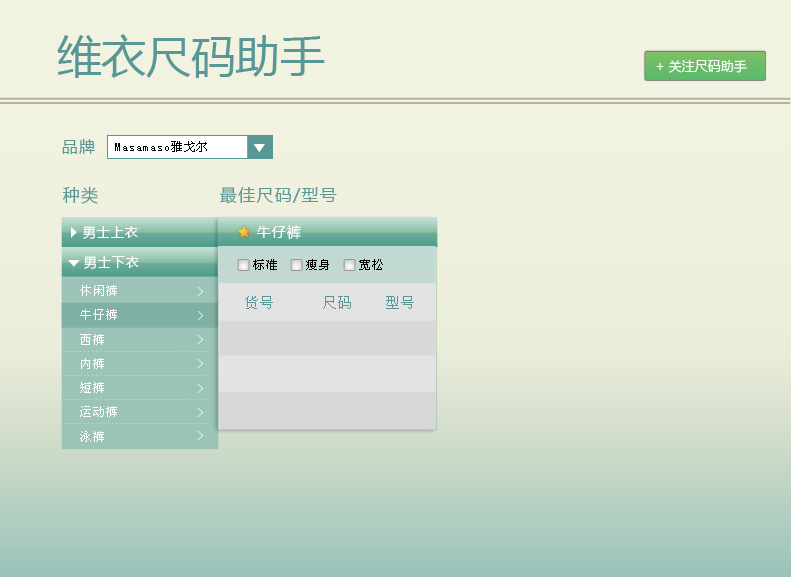
<style>
.page{position:relative;width:791px;height:577px;background:#f2f2e0}
.page>*{position:absolute;margin:0}
.t1{font:44.7px "MicrosoftYaHei";color:#599696}
.t2{font:13px "MicrosoftYaHei";color:#ffffff}
.t3{font:16px "MicrosoftYaHei";letter-spacing:0.075em;color:#599696}
.t4{font:12px "SimSun";letter-spacing:0.075em;color:#000000}
.t5{font:17px "MicrosoftYaHei";letter-spacing:0.075em;color:#599696}
.t6{font:13px "MicrosoftYaHei";letter-spacing:0.075em;color:#ffffff}
.t7{font:14px "MicrosoftYaHei";letter-spacing:0.075em;color:#ffffff}
.t8{font:12px/24.3px "SimSun";letter-spacing:0.075em;color:#ffffff}
.t9{font:14px/24.3px "SimSun";letter-spacing:0.075em;color:#ffffff}
.t10{font:14px/23px "SimSun";letter-spacing:0.075em;color:#ffffff}
.t11{font:14px "SimSun";letter-spacing:0.075em;color:#599696}
</style>
<div class="page">
<p class="t1" style="left:57px;top:34px;width:268px;height:44px">维衣尺码助手</p>
<p class="t2" style="left:656px;top:60px;width:91px;height:13px">+ 关注尺码助手</p>
<p class="t3" style="left:62px;top:139px;width:33px;height:15px">品牌</p>
<p class="t4" style="left:115px;top:141px;width:92px;height:11px">Masamaso雅戈尔</p>
<p class="t5" style="left:62px;top:186px;width:36px;height:18px">种类</p>
<p class="t5" style="left:220px;top:187px;width:117px;height:17px">最佳尺码/型号</p>
<p class="t6" style="left:83px;top:226px;width:55px;height:13px">男士上衣</p>
<p class="t7" style="left:257px;top:225px;width:44px;height:15px">牛仔裤</p>
<p class="t6" style="left:84px;top:256px;width:55px;height:13px">男士下衣</p>
<p class="t4" style="left:253px;top:259px;width:130px;height:11px">标准    瘦身    宽松</p>
<p class="t8" style="left:80px;top:285px;width:37px;height:157px">休闲裤<br>牛仔裤<br>西裤<br>内裤<br>短裤<br>运动裤<br>泳裤</p>
<p class="t9" style="left:197px;top:287px;width:7px;height:153px">&gt;<br>&gt;<br>&gt;<br>&gt;<br>&gt;<br>&gt;<br><span class="t10">&gt;</span></p>
<p class="t11" style="left:245px;top:296px;width:169px;height:13px">货号      尺码    型号</p>
</div>
